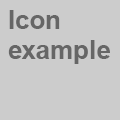
<style>
.page{position:relative;width:120px;height:120px;background:#cccccc}
.page>*{position:absolute;margin:0}
.t1{font:26px/30px "Arial-BoldMT";color:#666666}
</style>
<div class="page">
<p class="t1" style="left:8px;top:10px;width:102px;height:54px">Icon<br>example</p>
</div>
